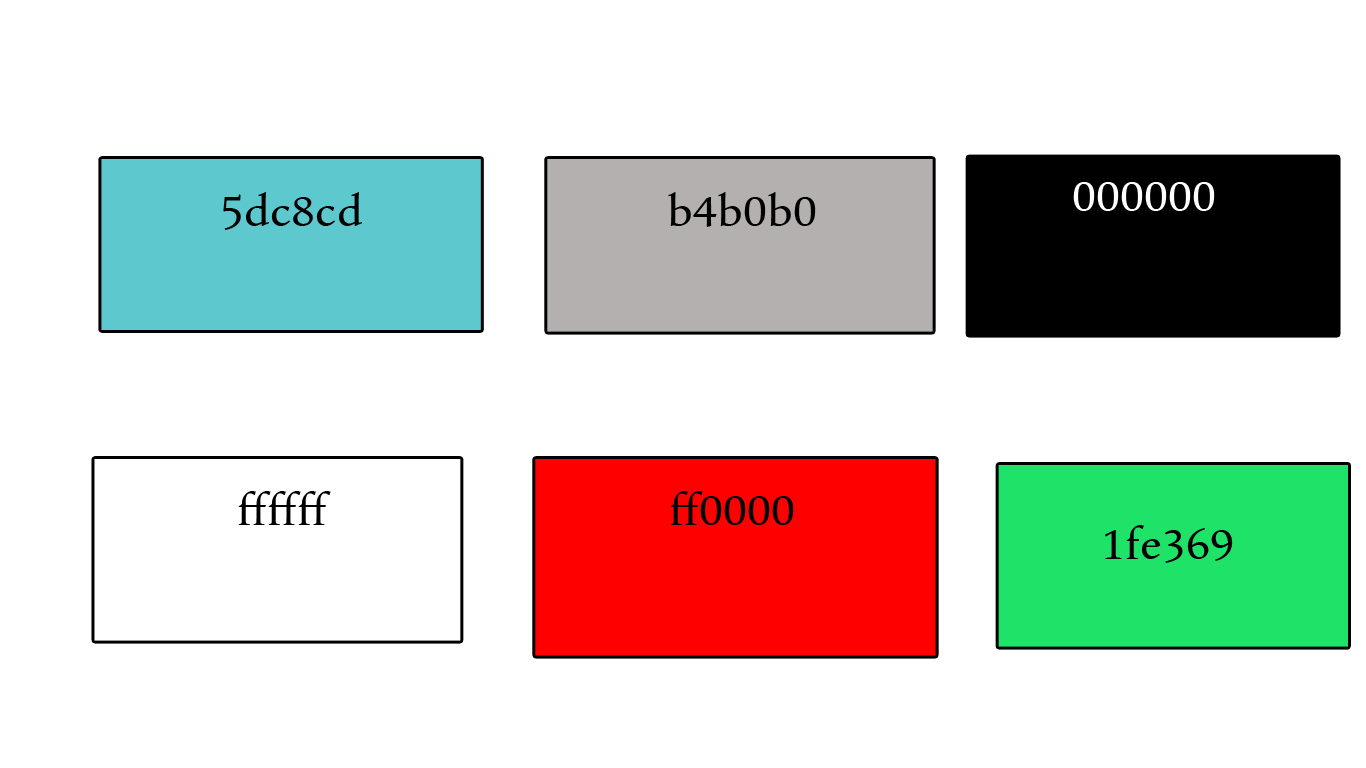
<style>
.page{position:relative;width:1366px;height:768px;background:#ffffff}
.page>*{position:absolute;margin:0}
.t1{font:48px "Pescadero";color:#ffffff}
.t2{font:48px "Pescadero";color:#000000}
</style>
<div class="page">
<p class="t1" style="left:1073px;top:182px;width:142px;height:29px">000000</p>
<p class="t2" style="left:223px;top:192px;width:139px;height:38px">5dc8cd</p>
<p class="t2" style="left:668px;top:192px;width:148px;height:35px">b4b0b0</p>
<p class="t2" style="left:238px;top:491px;width:93px;height:34px">ffffff</p>
<p class="t2" style="left:670px;top:491px;width:124px;height:34px">ff0000</p>
<p class="t2" style="left:1105px;top:525px;width:128px;height:38px">1fe369</p>
</div>
